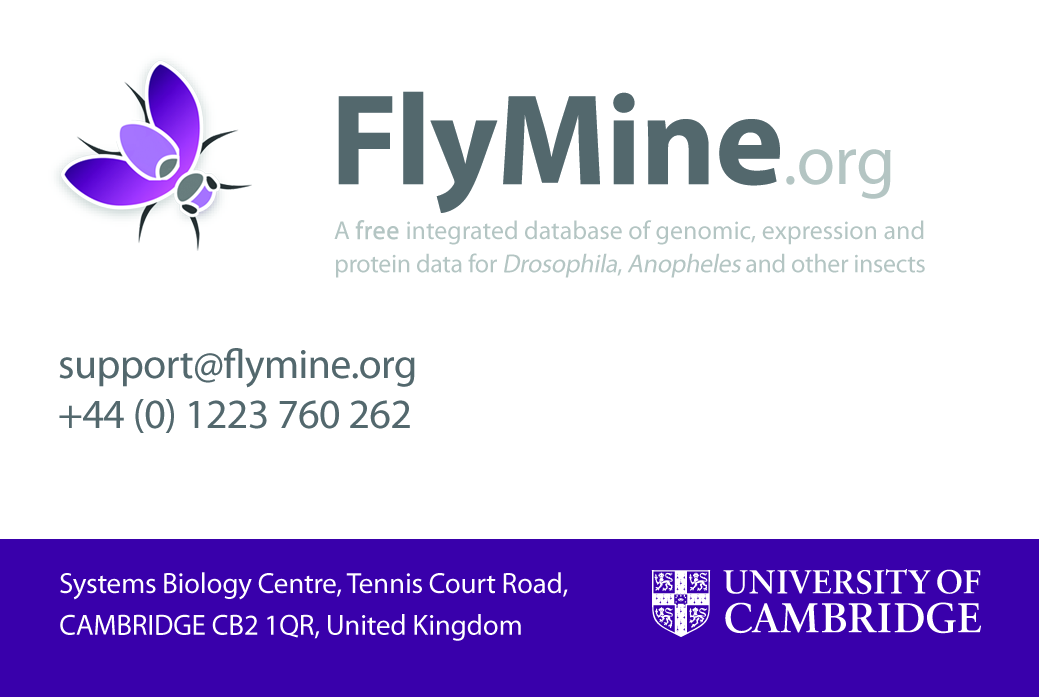
<style>
.page{position:relative;width:1039px;height:697px;background:#ffffff}
.page>*{position:absolute;margin:0}
.t1{font:130px "MyriadPro-Bold";letter-spacing:-0.01em;color:#53686d}
.t2{font:70.3px "MyriadPro-Regular";letter-spacing:-0.01em;color:#b3c5c3}
.t3{font:26px/33.3px "MyriadPro-Regular";color:#b3c5c3}
.t4{font:26px/33.3px "MyriadPro-Regular";color:#b3c5c3;font-weight:bold}
.t5{font:26px/33.3px "MyriadPro-Regular";letter-spacing:-0.013em;color:#b3c5c3}
.t6{font:26px/33.3px "MyriadPro-Regular";letter-spacing:-0.013em;color:#b3c5c3;font-style:italic}
.t7{font:41.7px "MyriadPro-Regular";letter-spacing:-0.01em;color:#53686d}
.t8{font:29.2px/41.7px "MyriadPro-Regular";letter-spacing:-0.01em;color:#ffffff}
</style>
<div class="page">
<p class="t1" style="left:338px;top:91px;width:553px;height:122px">FlyMine<span class="t2">.org</span></p>
<p class="t3" style="left:334px;top:220px;width:591px;height:58px">A <span class="t4">free</span> integrated database of genomic, expression and<br><span class="t5">protein data for </span><span class="t6">Drosophila</span><span class="t5">, </span><span class="t6">Anopheles </span><span class="t5">and other insects</span></p>
<p class="t7" style="left:59px;top:348px;width:356px;height:85px">support@flymine.org<br>+44 (0) 1223 760 262</p>
<p class="t8" style="left:60px;top:572px;width:508px;height:69px">Systems Biology Centre, Tennis Court Road,<br>CAMBRIDGE CB2 1QR, United Kingdom</p>
</div>
